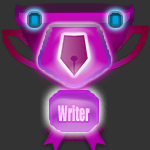
<style>
.page{position:relative;width:150px;height:150px;background:#333333}
.page>*{position:absolute;margin:0}
.t1{font:19.6px "Impact";color:#ffd1ff;scale:0.62 1}
</style>
<div class="page">
<p class="t1" style="left:58px;top:105px;width:32px;height:17px">Writer</p>
</div>
